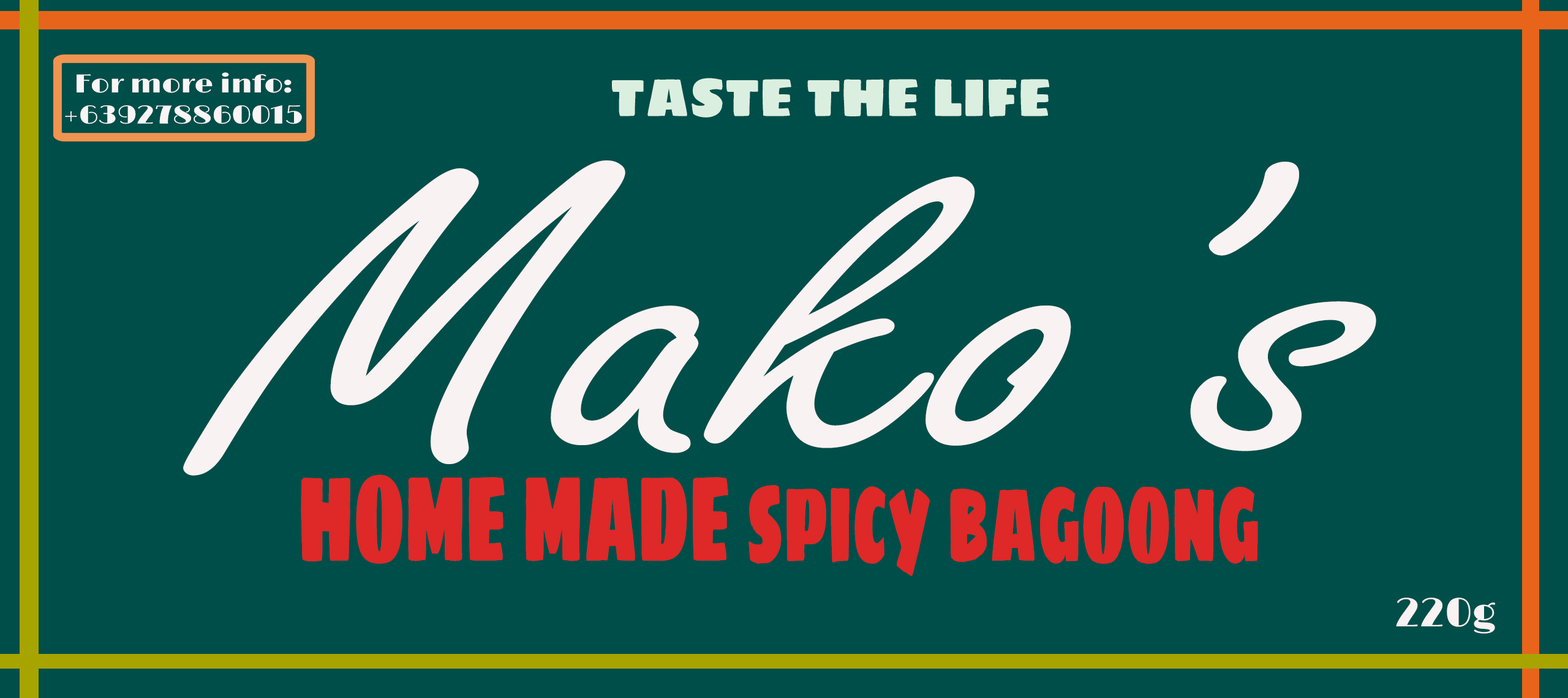
<style>
.page{position:relative;width:1568px;height:698px;background:#004e49}
.page>*{position:absolute;margin:0}
.t1{font:26px "Limelight-Regular";color:#f9f5f5;scale:1.13 1}
.t2{font:54.5px "SigmarOne-Regular";color:#dbefe0;scale:0.89 1}
.t3{font:435.8px "FreestyleScript-Regular";color:#f9f2f2;scale:1.42 1}
.t4{font:123.2px "SigmarOne-Regular";color:#df2828;scale:0.49 1}
.t5{font:40.8px "Limelight-Regular";color:#f9f2f2}
</style>
<div class="page">
<p class="t1" style="left:65px;top:72px;width:237px;height:52px;text-align:center">For more info:<br>+639278860015</p>
<p class="t2" style="left:612px;top:78px;width:437px;height:40px">TASTE THE LIFE</p>
<p class="t3" style="left:183px;top:160px;width:1193px;height:316px">Mako’s</p>
<p class="t4" style="left:301px;top:475px;width:957px;height:101px">HOME MADE spicy bagoong</p>
<p class="t5" style="left:1396px;top:598px;width:99px;height:36px">220g</p>
</div>
